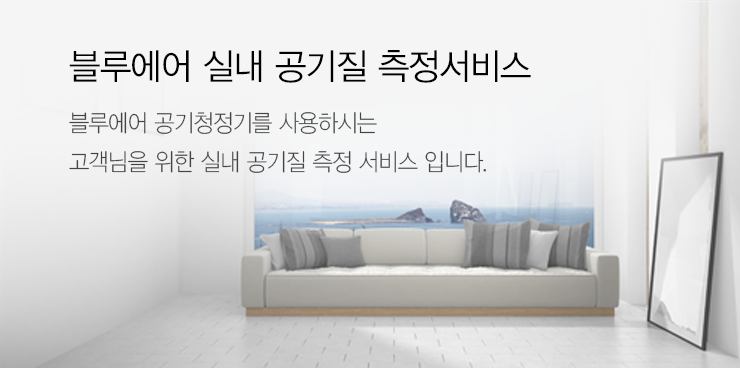
<style>
.page{position:relative;width:740px;height:368px;background:#f5f5f5}
.page>*{position:absolute;margin:0}
.t1{font:36px "YDVYGO32";letter-spacing:-0.025em;color:#000000;scale:0.95 1}
.t2{font:24px/39px "YDVYGO31";letter-spacing:-0.025em;color:#444444;scale:0.91 1}
.t3{font:24px/26px "YDVYGO31";letter-spacing:-0.025em;color:#444444;scale:0.91 1}
</style>
<div class="page">
<p class="t1" style="left:69px;top:50px;width:462px;height:33px">블루에어 실내 공기질 측정서비스</p>
<p class="t2" style="left:69px;top:112px;width:417px;height:61px"><span class="t3">블루에어 공기청정기를 사용하시는<br></span>고객님을 위한 실내 공기질 측정 서비스 입니다.</p>
</div>
